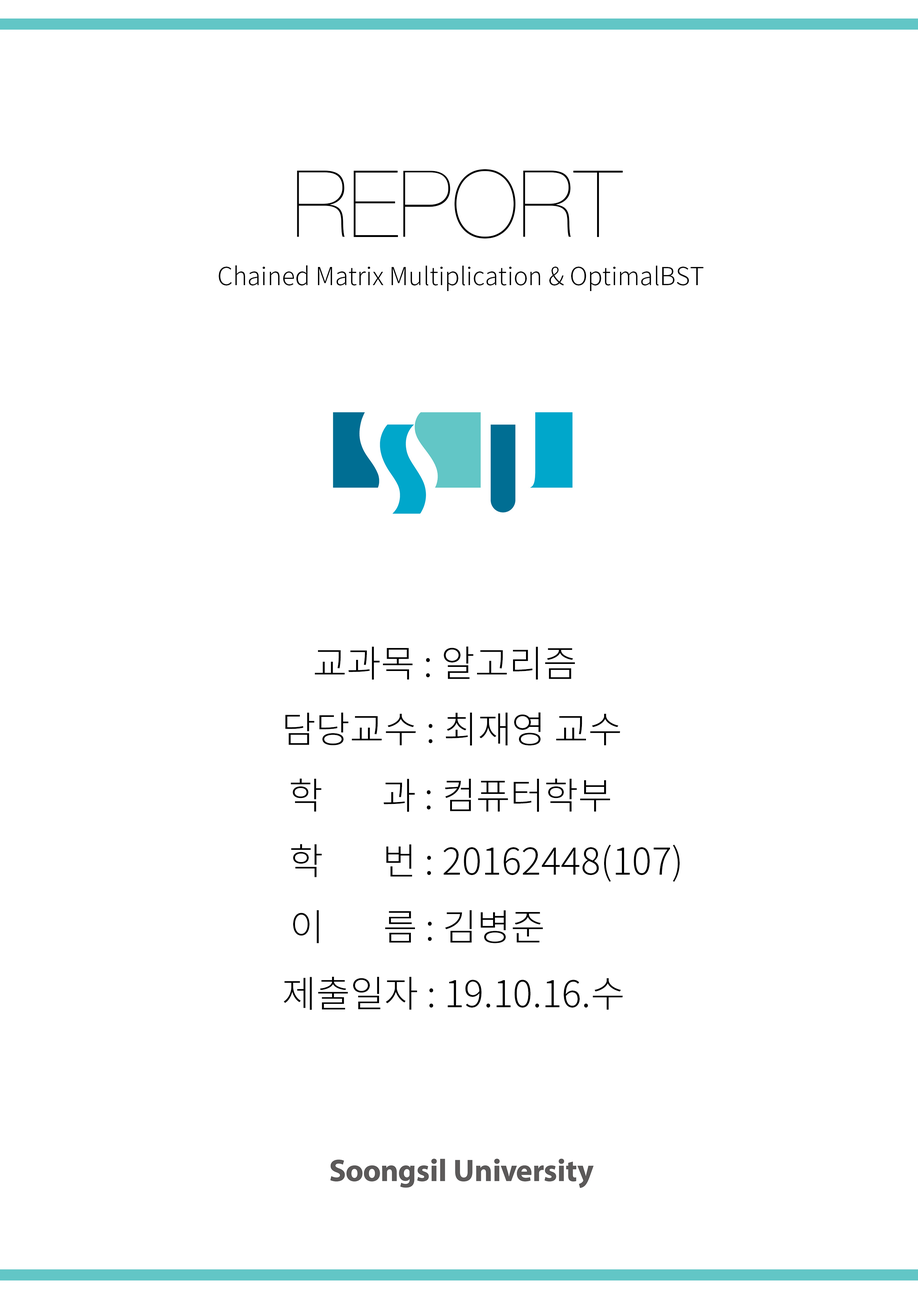
<style>
.page{position:relative;width:918px;height:1299px;background:#ffffff}
.page>*{position:absolute;margin:0}
.t1{font:24.7px "NotoSansCJKkr-Light";color:#000000}
.t2{font:37px "NotoSansCJKkr-Light";color:#000000}
</style>
<div class="page">
<p class="t1" style="left:219px;top:265px;width:485px;height:26px">Chained Matrix Multiplication &amp; OptimalBST</p>
<p class="t2" style="left:315px;top:646px;width:260px;height:34px">교과목 : 알고리즘</p>
<p class="t2" style="left:285px;top:712px;width:335px;height:34px">담당교수 : 최재영 교수</p>
<p class="t2" style="left:291px;top:778px;width:319px;height:34px">학     과 : 컴퓨터학부</p>
<p class="t2" style="left:291px;top:844px;width:389px;height:38px">학     번 : 20162448(107)</p>
<p class="t2" style="left:293px;top:910px;width:250px;height:33px">이      름 : 김병준</p>
<p class="t2" style="left:284px;top:976px;width:339px;height:34px">제출일자 : 19.10.16.수</p>
</div>
